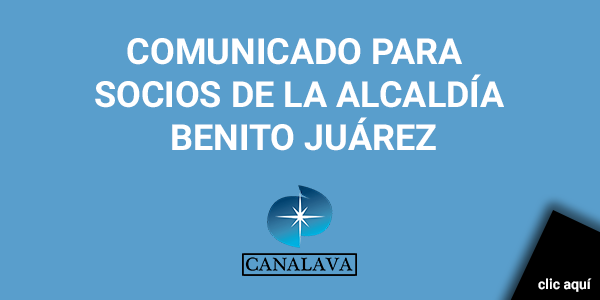
<style>
.page{position:relative;width:600px;height:300px;background:#599ecc}
.page>*{position:absolute;margin:0}
.t1{font:36px "Roboto-Bold";color:#ffffff}
.t2{font:14px "Roboto-Bold";color:#ffffff}
</style>
<div class="page">
<p class="t1" style="left:95px;top:38px;width:409px;height:113px;text-align:center">COMUNICADO PARA <br>SOCIOS DE LA ALCALDÍA<br> BENITO JUÁREZ</p>
<p class="t2" style="left:538px;top:278px;width:54px;height:14px">clic aquí</p>
</div>
